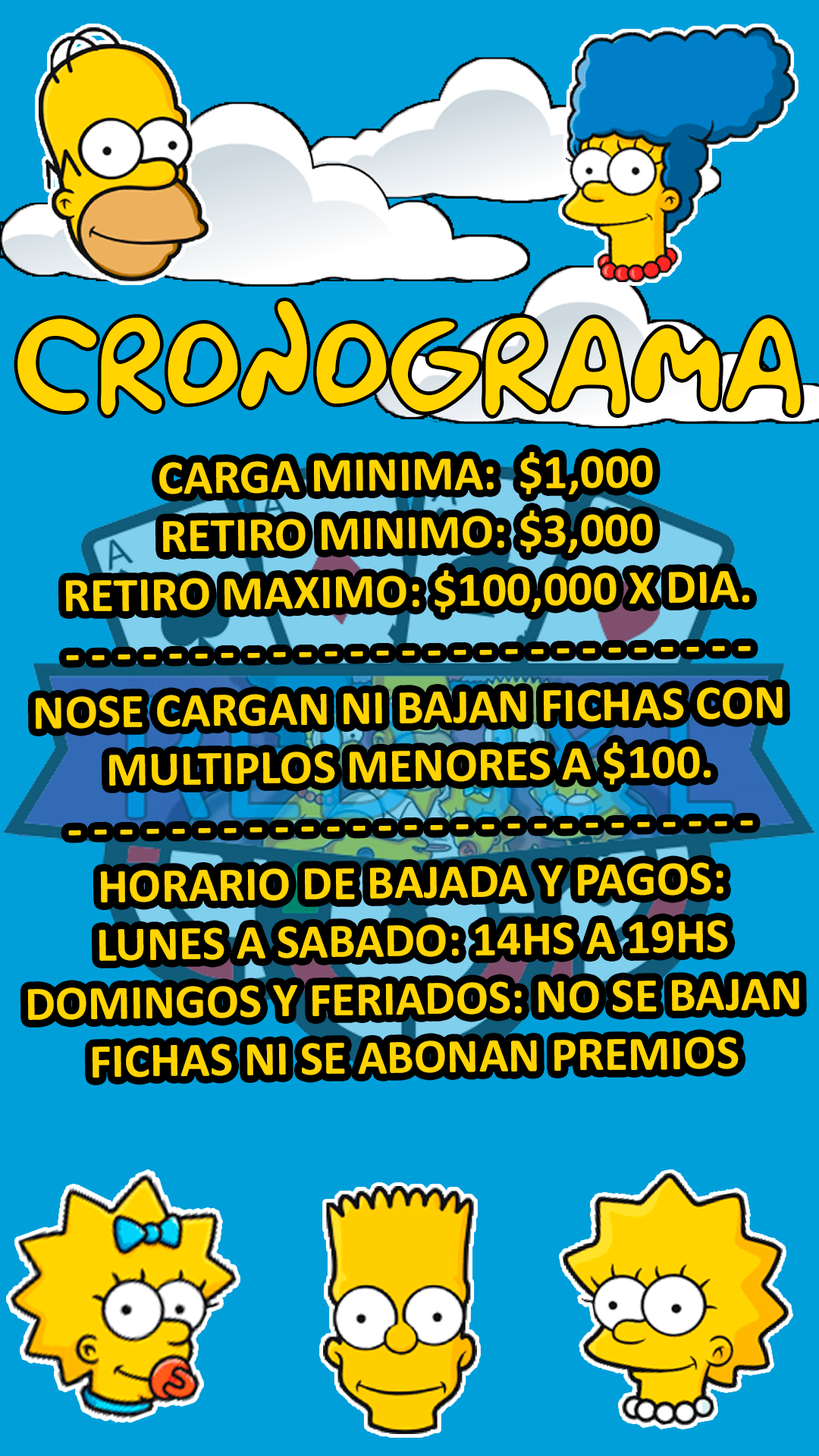
<style>
.page{position:relative;width:819px;height:1456px;background:#009fda}
.page>*{position:absolute;margin:0}
.t1{font:48.5px "Calibri-Bold";color:#ffd400}
</style>
<div class="page">
<p class="t1" style="left:27px;top:452px;width:772px;height:626px;text-align:center;rotate:-1deg">CARGA MINIMA:  $1,000<br>RETIRO MINIMO: $3,000<br>RETIRO MAXIMO: $100,000 X DIA.<br>- - - - - - - - - - - - - - - - - - - - - - - - - - -<br>NOSE CARGAN NI BAJAN FICHAS CON MULTIPLOS MENORES A $100.<br>- - - - - - - - - - - - - - - - - - - - - - - - - - -<br>HORARIO DE BAJADA Y PAGOS:<br>LUNES A SABADO: 14HS A 19HS<br>DOMINGOS Y FERIADOS: NO SE BAJAN FICHAS NI SE ABONAN PREMIOS</p>
</div>
